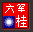
<style>
.page{position:relative;width:33px;height:32px;background:#f20000}
.page>*{position:absolute;margin:0}
.t1{font:10.4px "SimSun";color:#ffffff}
.t2{font:11.7px "SimSun";color:#ffffff}
</style>
<div class="page">
<p class="t1" style="left:5px;top:4px;width:20px;height:9px">六军</p>
<p class="t2" style="left:16px;top:15px;width:11px;height:12px">桂</p>
</div>
